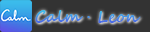
<style>
.page{position:relative;width:150px;height:32px;background:#333333}
.page>*{position:absolute;margin:0}
.t1{font:16px "SegoeScript-Bold"}
</style>
<div class="page">
<p class="t1" style="left:35px;top:10px;width:106px;height:13px">Calm · Leon</p>
</div>
